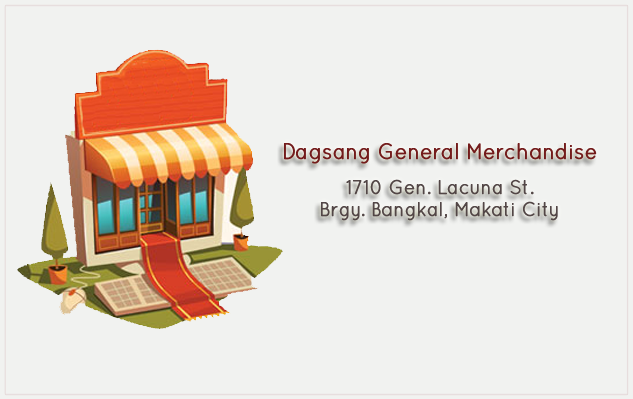
<style>
.page{position:relative;width:633px;height:399px;background:#f1f2f0}
.page>*{position:absolute;margin:0}
.t1{font:22px "Quicksand-Regular";letter-spacing:-0.005em;color:#731b1b;font-weight:bold;scale:0.91 1}
.t2{font:19.8px "Quicksand-Regular";letter-spacing:-0.005em;color:#524646;font-weight:bold;scale:0.91 1}
</style>
<div class="page">
<p class="t1" style="left:284px;top:143px;width:313px;height:21px">Dagsang General Merchandise</p>
<p class="t2" style="left:321px;top:179px;width:237px;height:42px;text-align:center">1710 Gen. Lacuna St.<br>Brgy. Bangkal, Makati City</p>
</div>
